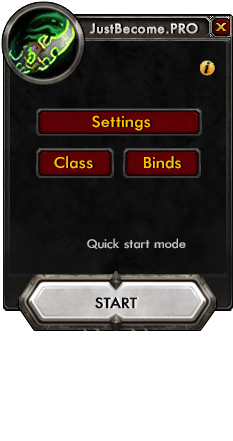
<style>
.page{position:relative;width:233px;height:441px;background:#ffffff}
.page>*{position:absolute;margin:0}
.t1{font:12.8px "Futura-Medium";letter-spacing:0.01em;color:#d0ccc9;font-weight:bold;scale:1.05 1}
.t2{font:17.7px "Futura-Normal";letter-spacing:-0.005em;color:#ffc000;scale:1.05 1}
.t3{font:13.9px "Futura-Normal";letter-spacing:-0.025em;color:#c4c2c1;scale:1.05 1}
.t4{font:13.9px "Futura-Medium";letter-spacing:-0.025em;color:#0d0d0d;font-weight:bold;scale:1.05 1}
</style>
<div class="page">
<p class="t1" style="left:89px;top:23px;width:109px;height:11px">JustBecome.PRO</p>
<p class="t2" style="left:92px;top:115px;width:59px;height:16px">Settings</p>
<p class="t2" style="left:54px;top:156px;width:39px;height:13px">Class</p>
<p class="t2" style="left:144px;top:156px;width:37px;height:13px">Binds</p>
<p class="t3" style="left:87px;top:238px;width:99px;height:11px">Quick start mode</p>
<p class="t4" style="left:95px;top:297px;width:42px;height:12px">START</p>
</div>
